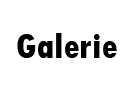
<style>
.page{position:relative;width:140px;height:100px;background:#ffffff}
.page>*{position:absolute;margin:0}
.t1{font:37px "TwCenMT-CondensedExtraBold";color:#000000}
</style>
<div class="page">
<p class="t1" style="left:17px;top:33px;width:100px;height:25px">Galerie</p>
</div>
